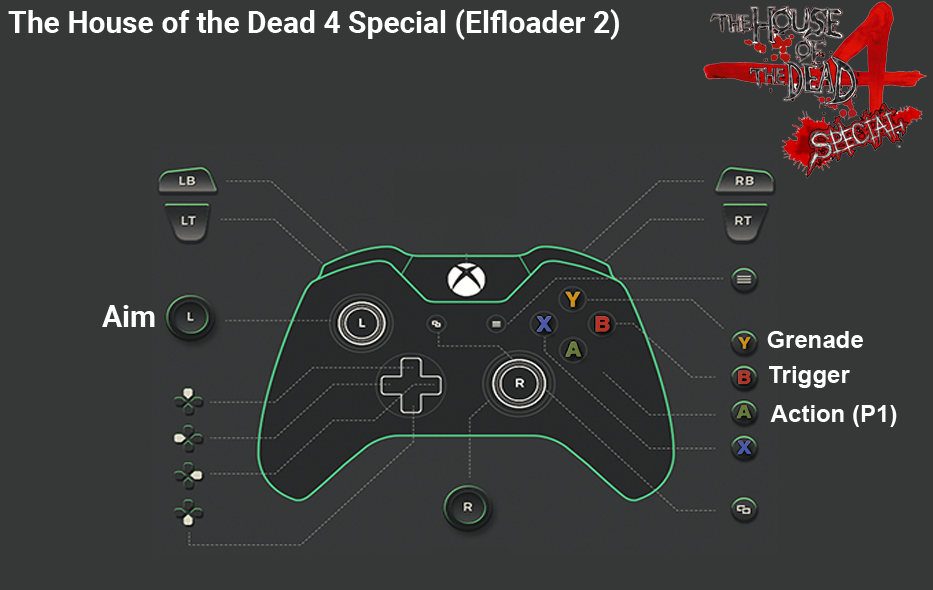
<style>
.page{position:relative;width:933px;height:590px;background:#363838}
.page>*{position:absolute;margin:0}
.t1{font:30px "Roboto-Bold";color:#ffffff}
.t2{font:30px "Roboto-Bold";color:#fefefe}
.t3{font:24px "Arial-BoldMT";color:#fefefe}
</style>
<div class="page">
<p class="t1" style="left:8px;top:9px;width:611px;height:31px">The House of the Dead 4 Special (Elfloader 2)</p>
<p class="t2" style="left:102px;top:305px;width:53px;height:22px">Aim</p>
<p class="t3" style="left:767px;top:331px;width:96px;height:17px">Grenade</p>
<p class="t3" style="left:769px;top:366px;width:81px;height:22px">Trigger</p>
<p class="t3" style="left:770px;top:405px;width:127px;height:22px">Action (P1)</p>
</div>
